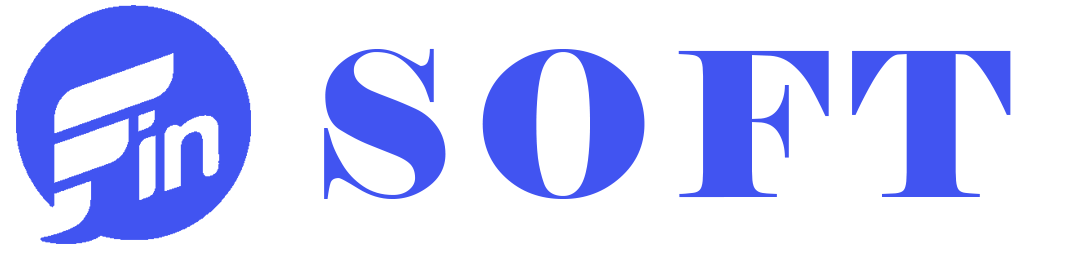
<style>
.page{position:relative;width:1091px;height:258px;background:#ffffff}
.page>*{position:absolute;margin:0}
.t1{font:200px "Elephant-Regular";letter-spacing:0.1em;color:#4154f1}
</style>
<div class="page">
<p class="t1" style="left:324px;top:48px;width:687px;height:151px">SOFT</p>
</div>
